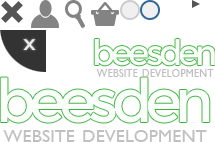
<style>
.page{position:relative;width:215px;height:142px;background:#ffffff}
.page>*{position:absolute;margin:0}
.t1{font:15.1px "GillSansMT";color:#c0c0c0;font-variant:small-caps}
.t2{font:26px "GillSansMT";color:#c0c0c0;font-variant:small-caps}
</style>
<div class="page">
<p class="t1" style="left:96px;top:69px;width:118px;height:8px">website development</p>
<p class="t2" style="left:3px;top:130px;width:204px;height:12px">website development</p>
</div>
